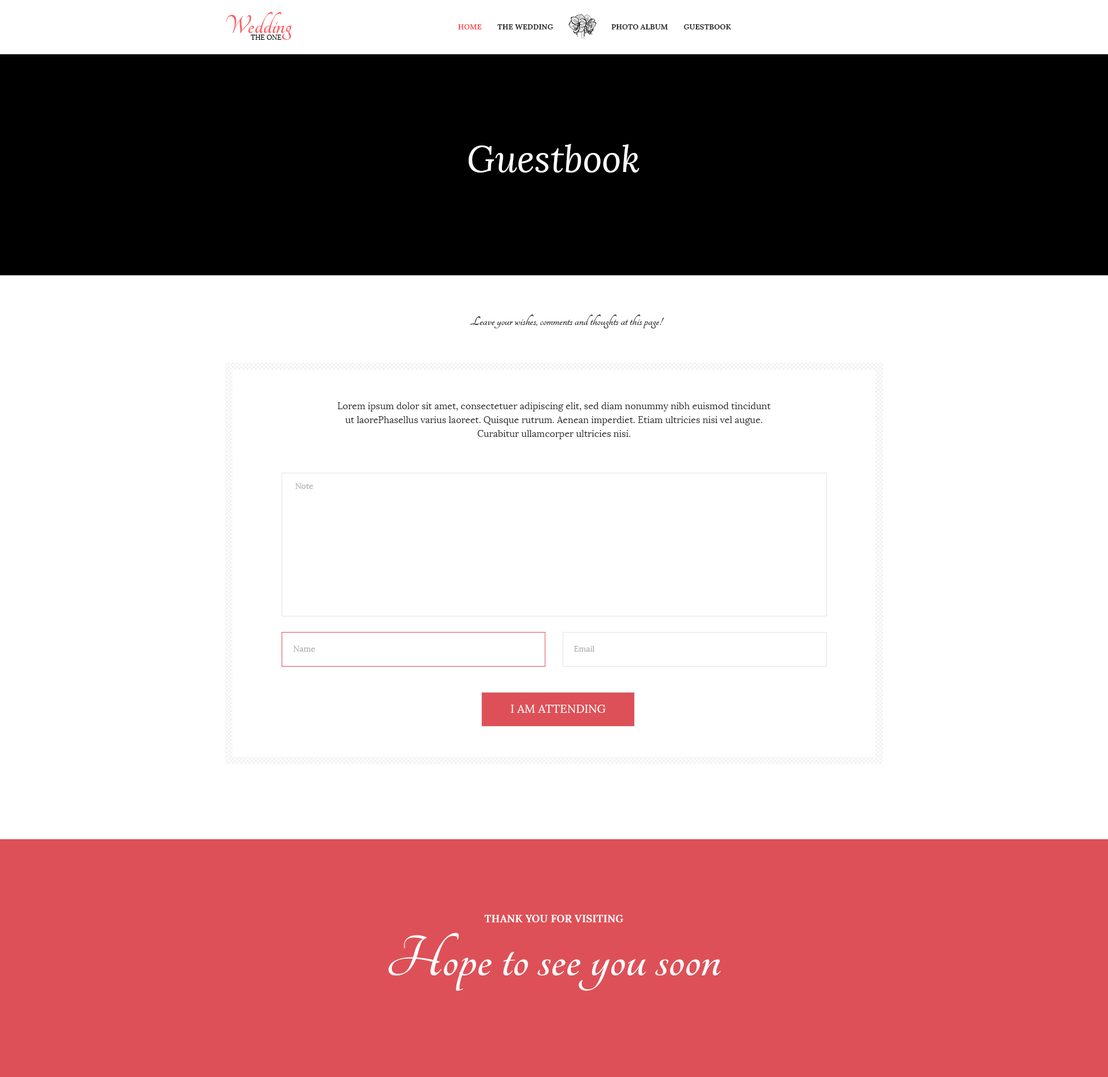
<style>
.page{position:relative;width:1108px;height:1077px;background:#ffffff}
.page>*{position:absolute;margin:0}
.t1{font:27.7px/6.9px "Tangerine-Bold";color:#fc5a61}
.t2{font:6.9px/6.9px "Lora-Regular";color:#000000}
.t3{font:7.5px "Lora-Bold";color:#2c2c2c;text-transform:uppercase}
.t4{font:7.5px "Lora-Bold";color:#fc5a61;text-transform:uppercase}
.t5{font:36.9px "Lora-Italic";color:#ffffff}
.t6{font:13.8px "Tangerine-Bold";color:#2d2d2d}
.t7{font:9.2px/13.8px "Lora-Regular";color:#2d2d2d}
.t8{font:8.1px "Lora-Regular";color:#afafaf}
.t9{font:11.5px "Lora-Regular";color:#ffffff;text-transform:uppercase}
.t10{font:10.4px "Lora-Bold";color:#ffffff}
.t11{font:62.3px "Tangerine-Bold";color:#ffffff}
</style>
<div class="page">
<p class="t1" style="left:226px;top:12px;width:66px;height:28px">Wedding<br>    <span class="t2">THE ONE</span></p>
<p class="t3" style="left:458px;top:24px;width:273px;height:5px"><span class="t4">HOME        </span>THE WEDDING           PHOTO ALBUM        GUESTBOOK</p>
<p class="t5" style="left:468px;top:144px;width:171px;height:28px">Guestbook</p>
<p class="t6" style="left:470px;top:314px;width:194px;height:14px">Leave your wishes, comments and thoughts at this page!</p>
<p class="t7" style="left:337px;top:402px;width:434px;height:37px;text-align:center">Lorem ipsum dolor sit amet, consectetuer adipiscing elit, sed diam nonummy nibh euismod tincidunt ut laorePhasellus varius laoreet. Quisque rutrum. Aenean imperdiet. Etiam ultricies nisi vel augue. Curabitur ullamcorper ultricies nisi.</p>
<p class="t8" style="left:295px;top:483px;width:18px;height:6px">Note</p>
<p class="t8" style="left:293px;top:646px;width:22px;height:5px">Name</p>
<p class="t8" style="left:573px;top:646px;width:21px;height:5px">Email</p>
<p class="t9" style="left:511px;top:704px;width:95px;height:8px">i am attending</p>
<p class="t10" style="left:484px;top:914px;width:139px;height:8px">THANK YOU FOR VISITING</p>
<p class="t11" style="left:388px;top:932px;width:333px;height:59px">Hope to see you soon</p>
</div>
